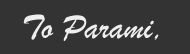
<style>
.page{position:relative;width:190px;height:54px;background:#333333}
.page>*{position:absolute;margin:0}
.t1{font:36px "BrushScriptMT";color:#eeeeee}
</style>
<div class="page">
<p class="t1" style="left:23px;top:14px;width:136px;height:27px">To Parami,</p>
</div>
